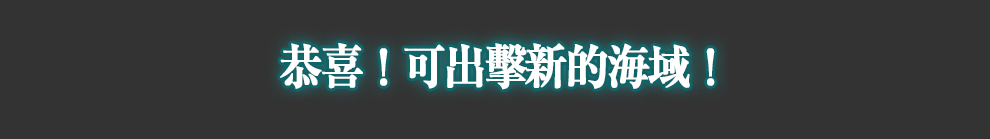
<style>
.page{position:relative;width:990px;height:139px;background:#333333}
.page>*{position:absolute;margin:0}
.t1{font:48px "RyuminPro-Bold";letter-spacing:-0.08em;color:#ffffff;font-weight:bold;scale:0.9 1}
</style>
<div class="page">
<p class="t1" style="left:280px;top:43px;width:435px;height:47px">恭喜！可出擊新的海域！</p>
</div>
